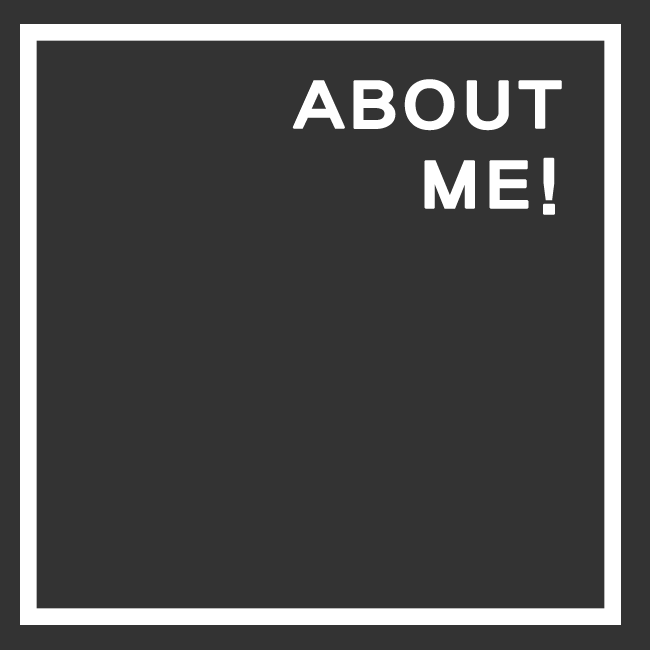
<style>
.page{position:relative;width:650px;height:650px;background:#333333}
.page>*{position:absolute;margin:0}
.t1{font:66.7px "HaanYGodic24";color:#ffffff;font-weight:bold;scale:1.1 1}
</style>
<div class="page">
<p class="t1" style="left:292px;top:79px;width:270px;height:136px;text-align:right">ABOUT<br>ME!</p>
</div>
